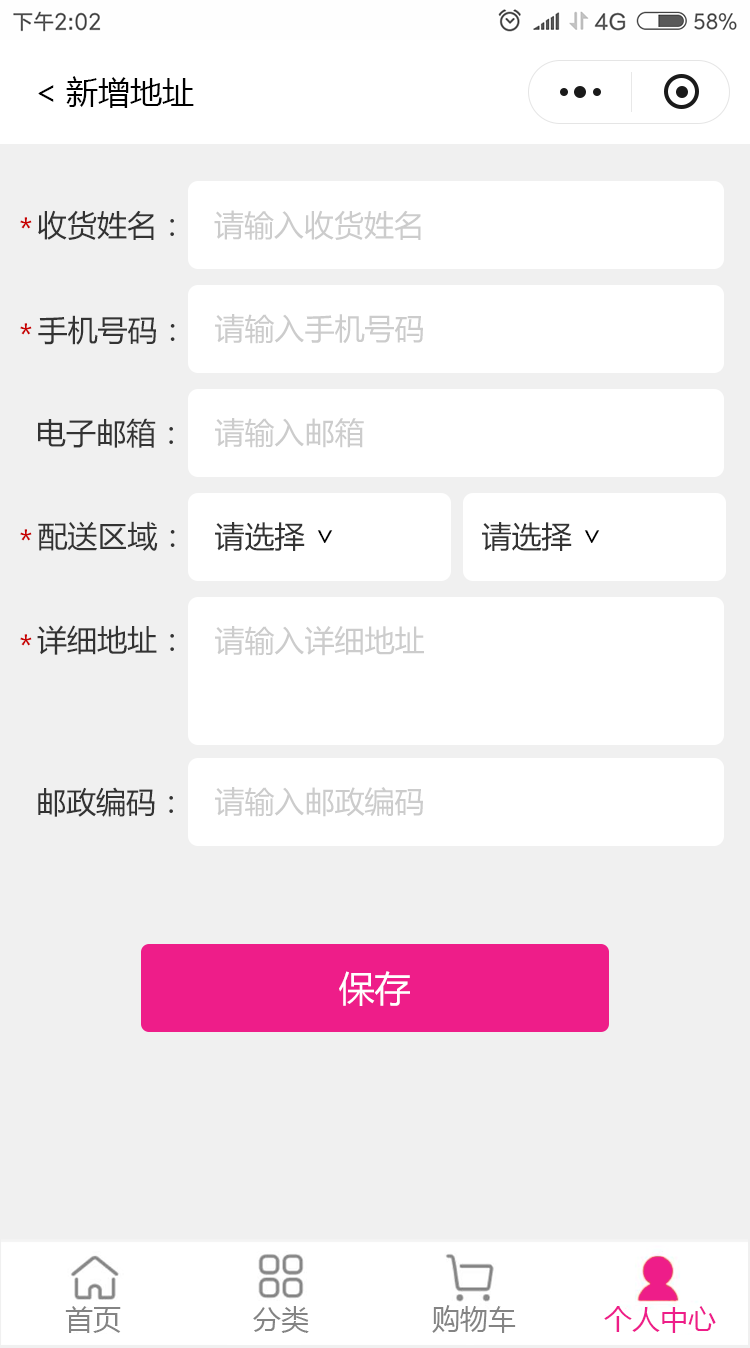
<style>
.page{position:relative;width:750px;height:1348px;background:#ffffff}
.page>*{position:absolute;margin:0}
.t1{font:32px "MicrosoftYaHei";color:#000000}
.t2{font:30px "MicrosoftYaHei";color:#c80000}
.t3{font:30px "MicrosoftYaHei";color:#333333}
.t4{font:30px "MicrosoftYaHei";color:#cccccc}
.t5{font:28px "MicrosoftYaHei";color:#000000}
.t6{font:36px "MicrosoftYaHei";color:#ffffff}
</style>
<div class="page">
<p class="t1" style="left:38px;top:76px;width:156px;height:32px">&lt;新增地址</p>
<p class="t2" style="left:20px;top:217px;width:12px;height:12px">*</p>
<p class="t3" style="left:38px;top:210px;width:136px;height:30px">收货姓名：</p>
<p class="t4" style="left:214px;top:210px;width:207px;height:30px">请输入收货姓名</p>
<p class="t3" style="left:38px;top:315px;width:137px;height:30px">手机号码：</p>
<p class="t4" style="left:215px;top:314px;width:208px;height:30px">请输入手机号码</p>
<p class="t2" style="left:20px;top:323px;width:12px;height:12px">*</p>
<p class="t3" style="left:38px;top:418px;width:135px;height:30px">电子邮箱：</p>
<p class="t4" style="left:215px;top:418px;width:149px;height:30px">请输入邮箱</p>
<p class="t3" style="left:38px;top:521px;width:137px;height:30px">配送区域：</p>
<p class="t2" style="left:20px;top:529px;width:12px;height:12px">*</p>
<p class="t3" style="left:215px;top:522px;width:90px;height:29px">请选择</p>
<p class="t5" style="left:317px;top:530px;width:16px;height:13px;rotate:90deg">&gt;</p>
<p class="t3" style="left:482px;top:522px;width:90px;height:29px">请选择</p>
<p class="t5" style="left:584px;top:530px;width:16px;height:13px;rotate:90deg">&gt;</p>
<p class="t3" style="left:37px;top:625px;width:137px;height:30px">详细地址：</p>
<p class="t4" style="left:215px;top:626px;width:209px;height:30px">请输入详细地址</p>
<p class="t2" style="left:20px;top:634px;width:12px;height:12px">*</p>
<p class="t3" style="left:38px;top:787px;width:135px;height:30px">邮政编码：</p>
<p class="t4" style="left:215px;top:787px;width:208px;height:30px">请输入邮政编码</p>
<p class="t6" style="left:339px;top:971px;width:71px;height:35px">保存</p>
</div>
